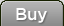
<style>
.page{position:relative;width:64px;height:26px}
.page>*{position:absolute;margin:0}
.t1{font:17px "GothamMedium";letter-spacing:-0.02em;color:#ffffff}
</style>
<div class="page">
<p class="t1" style="left:16px;top:8px;width:31px;height:15px">Buy</p>
</div>
